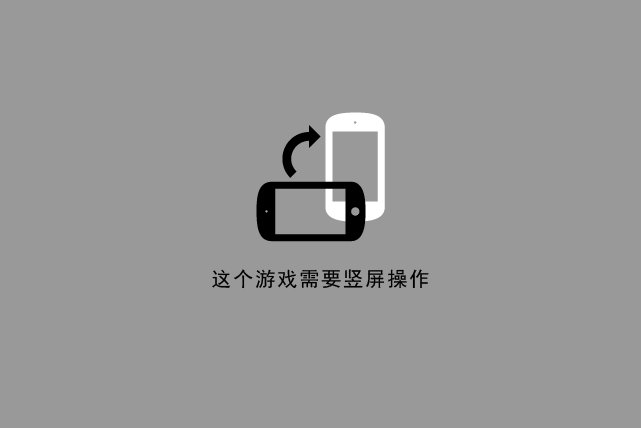
<style>
.page{position:relative;width:641px;height:428px;background:#999999}
.page>*{position:absolute;margin:0}
.t1{font:20px "SimHei";letter-spacing:0.1em;color:#000000}
</style>
<div class="page">
<p class="t1" style="left:212px;top:269px;width:217px;height:20px">这个游戏需要竖屏操作</p>
</div>
